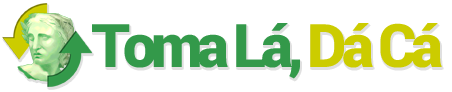
<style>
.page{position:relative;width:452px;height:92px;background:#ffffff}
.page>*{position:absolute;margin:0}
.t1{font:60px "Roboto-Black";letter-spacing:-0.09em;color:#33994a}
.t2{font:60px "Roboto-Black";letter-spacing:-0.09em;color:#cccc00}
</style>
<div class="page">
<p class="t1" style="left:92px;top:23px;width:350px;height:56px">Toma Lá, <span class="t2">Dá Cá</span></p>
</div>
